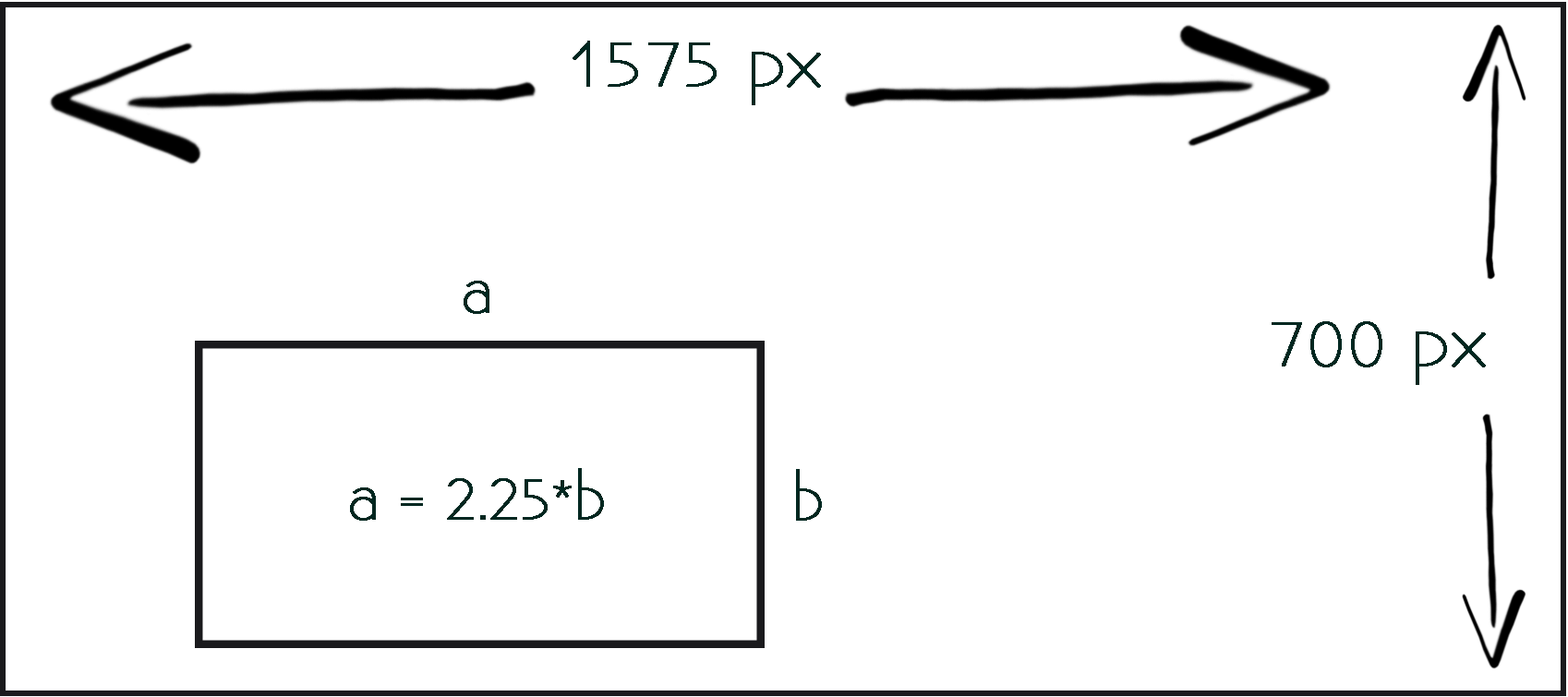
<style>
.page{position:relative;width:1568px;height:697px;background:#ffffff}
.page>*{position:absolute;margin:0}
.t1{font:61.5px "Existence-Light";letter-spacing:-0.005em;color:#002720;font-weight:bold;scale:1.16 1}
.t2{font:57px "Existence-Light";letter-spacing:-0.005em;color:#002720;font-weight:bold}
</style>
<div class="page">
<p class="t1" style="left:573px;top:41px;width:248px;height:64px">1575 px</p>
<p class="t2" style="left:464px;top:281px;width:25px;height:33px">a</p>
<p class="t1" style="left:1272px;top:321px;width:214px;height:64px">700 px</p>
<p class="t2" style="left:350px;top:468px;width:254px;height:53px">a = 2.25*b</p>
<p class="t2" style="left:796px;top:469px;width:26px;height:52px">b</p>
</div>
